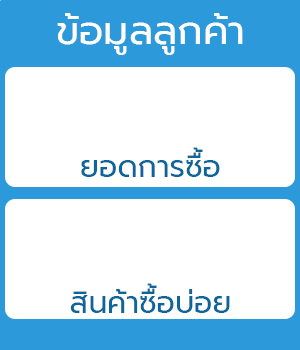
<style>
.page{position:relative;width:300px;height:350px;background:#ffffff}
.page>*{position:absolute;margin:0}
.t1{font:40px "Prompt-Regular";color:#ffffff}
.t2{font:30px "Prompt-Regular";color:#0d669b}
</style>
<div class="page">
<p class="t1" style="left:57px;top:13px;width:186px;height:42px">ข้อมูลลูกค้า</p>
<p class="t2" style="left:81px;top:147px;width:139px;height:30px">ยอดการซื้อ</p>
<p class="t2" style="left:70px;top:283px;width:160px;height:30px">สินค้าซื้อบ่อย</p>
</div>
